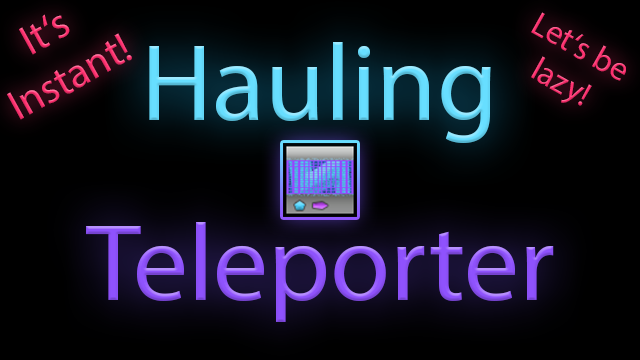
<style>
.page{position:relative;width:640px;height:360px;background:#000000}
.page>*{position:absolute;margin:0}
.t1{font:42.7px "MyriadPro-Regular";color:#ff306f}
.t2{font:33.4px "MyriadPro-Regular";color:#ff306f}
.t3{font:109.3px "MyriadPro-Regular";color:#67deff}
.t4{font:109.3px "MyriadPro-Regular";color:#8f52fd}
</style>
<div class="page">
<p class="t1" style="left:7px;top:14px;width:125px;height:106px;text-align:center;rotate:-29deg">It‘s<br>Instant!</p>
<p class="t2" style="left:531px;top:12px;width:95px;height:94px;text-align:center;rotate:29deg">Let‘s be<br>lazy!</p>
<p class="t3" style="left:149px;top:42px;width:342px;height:101px">Hauling</p>
<p class="t4" style="left:86px;top:222px;width:468px;height:100px">Teleporter</p>
</div>
